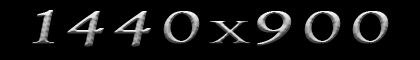
<style>
.page{position:relative;width:420px;height:60px;background:#000000}
.page>*{position:absolute;margin:0}
.t1{font:48px "GoudyOldStyleT-Italic";letter-spacing:0.075em;font-variant:small-caps;font-weight:bold;scale:1.67 1}
.t2{font:36px "RingbearerMedium";letter-spacing:0.075em;scale:1.67 1}
</style>
<div class="page">
<p class="t1" style="left:32px;top:10px;width:357px;height:37px">1440<span class="t2">x</span>900</p>
</div>
